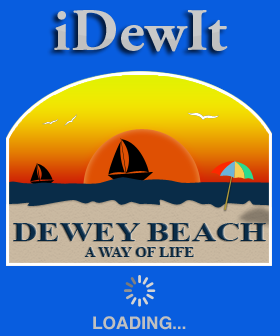
<style>
.page{position:relative;width:280px;height:336px;background:#085ddf}
.page>*{position:absolute;margin:0}
.t1{font:60px "AGaramondPro-Bold";letter-spacing:0.01em;color:#c0c0c0}
.t2{font:13.6px/15.1px "TimesNewRomanPS-BoldMT";color:#092c48;text-transform:uppercase;scale:1.11 1}
.t3{font:26.9px/15.1px "TimesNewRomanPS-BoldMT";color:#092c48;text-transform:uppercase;scale:1.25 1}
.t4{font:17.4px "Helvetica-Bold";color:#c0c0c0;text-transform:uppercase}
</style>
<div class="page">
<p class="t1" style="left:54px;top:10px;width:174px;height:42px">iDewIt</p>
<p class="t2" style="left:13px;top:223px;width:253px;height:34px;text-align:center"><span class="t3">Dewey Beach<br></span>A way of Life</p>
<p class="t4" style="left:93px;top:316px;width:93px;height:14px">Loading...</p>
</div>
